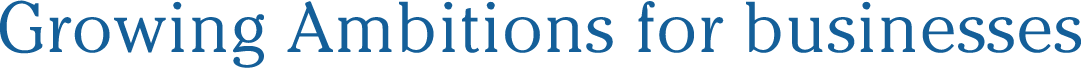
<style>
.page{position:relative;width:1081px;height:68px;background:#ffffff}
.page>*{position:absolute;margin:0}
.t1{font:71px "CheltenhamLight";letter-spacing:0.026em;color:#145f99}
</style>
<div class="page">
<p class="t1" style="left:0px;top:0px;width:1081px;height:68px">Growing Ambitions for businesses</p>
</div>
